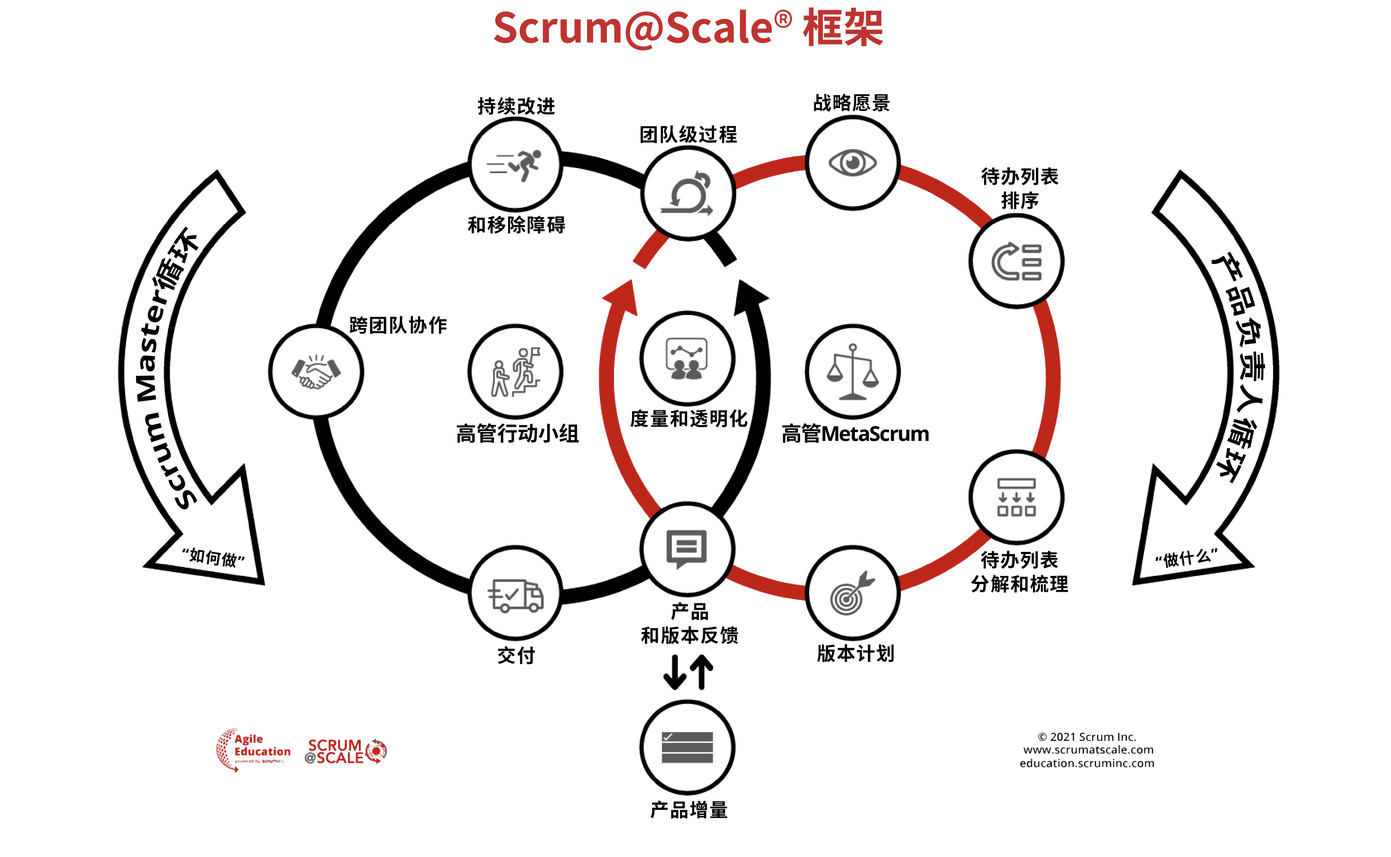
<style>
.page{position:relative;width:1391px;height:857px;background:#ffffff}
.page>*{position:absolute;margin:0}
.t1{font:41.2px "NotoSansCJKsc-Bold";color:#be3430}
.t2{font:41.2px "NotoSansCJKsc-Regular";color:#be3430}
.t3{font:18.9px "NotoSansCJKsc-Bold";letter-spacing:0.05em;color:#000000}
.t4{font:18.9px/24px "NotoSansCJKsc-Bold";letter-spacing:0.05em;color:#000000}
.t5{font:25.7px "NotoSans-Bold";color:#000000}
.t6{font:25.7px "NotoSansCJKsc-Bold";color:#000000}
.t7{font:25.7px "NotoSansCJKsc-Bold";letter-spacing:0.05em;color:#000000}
.t8{font:20.6px "NotoSansCJKsc-Bold";color:#000000}
.t9{font:20.6px "NotoSans-Bold";letter-spacing:-0.05em;color:#000000}
.t10{font:20.6px "NotoSansCJKsc-Bold";letter-spacing:-0.05em;color:#000000}
.t11{font:15.4px "NotoSansCJKsc-Bold";letter-spacing:0.05em;color:#000000}
.t12{font:15.4px "NotoSans-Bold";letter-spacing:0.05em;color:#000000}
</style>
<div class="page">
<p class="t1" style="left:494px;top:7px;width:389px;height:44px">Scrum@Scale<span class="t2">® </span>框架</p>
<p class="t3" style="left:478px;top:97px;width:77px;height:18px">持续改进</p>
<p class="t3" style="left:814px;top:93px;width:76px;height:18px">战略愿景</p>
<p class="t3" style="left:640px;top:125px;width:97px;height:18px">团队级过程</p>
<p class="t4" style="left:981px;top:167px;width:77px;height:42px;text-align:center">待办列表<br>排序</p>
<p class="t3" style="left:468px;top:216px;width:97px;height:18px">和移除障碍</p>
<p class="t5" style="left:136px;top:226px;width:62px;height:284px;rotate:-89deg">Scrum Master<span class="t6">循环</span></p>
<p class="t7" style="left:1211px;top:252px;width:54px;height:232px;rotate:90deg">产品负责人循环</p>
<p class="t3" style="left:349px;top:316px;width:98px;height:18px">跨团队协作</p>
<p class="t3" style="left:630px;top:409px;width:117px;height:19px">度量和透明化</p>
<p class="t8" style="left:457px;top:424px;width:122px;height:19px">高管行动小组</p>
<p class="t9" style="left:782px;top:424px;width:147px;height:19px"><span class="t10">高管</span>MetaScrum</p>
<p class="t11" style="left:182px;top:548px;width:63px;height:20px;rotate:8deg"><span class="t12">“</span>如何做<span class="t12">”</span></p>
<p class="t4" style="left:971px;top:551px;width:97px;height:42px;text-align:center">待办列表<br>分解和梳理</p>
<p class="t11" style="left:1155px;top:548px;width:62px;height:20px;rotate:-8deg"><span class="t12">“</span>做什么<span class="t12">”</span></p>
<p class="t4" style="left:641px;top:602px;width:97px;height:43px;text-align:center">产品<br>和版本反馈</p>
<p class="t3" style="left:498px;top:646px;width:37px;height:18px">交付</p>
<p class="t3" style="left:817px;top:644px;width:76px;height:19px">版本计划</p>
<p class="t3" style="left:650px;top:801px;width:77px;height:18px">产品增量</p>
</div>
